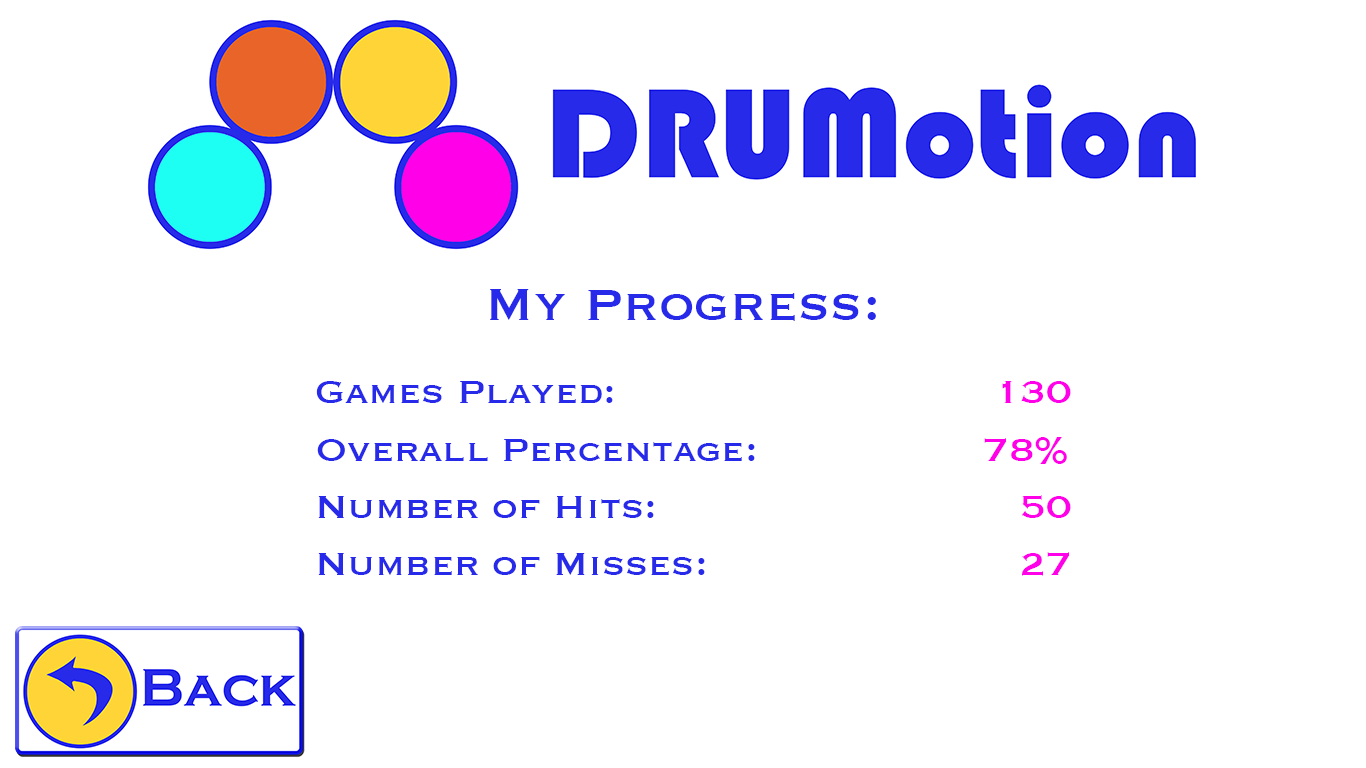
<style>
.page{position:relative;width:1366px;height:768px;background:#ffffff}
.page>*{position:absolute;margin:0}
.t1{font:58.3px "Copperplate";color:#272ae8}
.t2{font:41.7px "Copperplate";color:#272ae8}
.t3{font:41.7px "Copperplate";color:#ff00e8}
</style>
<div class="page">
<p class="t1" style="left:490px;top:289px;width:386px;height:32px">My Progress:</p>
<p class="t2" style="left:316px;top:381px;width:439px;height:194px">Games Played:      <br>Overall Percentage: <br>Number of Hits: <br>Number of Misses:</p>
<p class="t3" style="left:984px;top:381px;width:87px;height:195px;text-align:right">130<br>78%<br>50<br>27</p>
</div>
